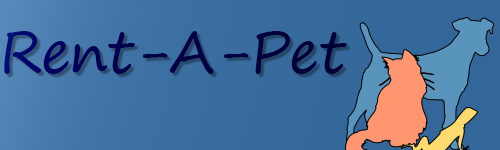
<style>
.page{position:relative;width:500px;height:150px}
.page>*{position:absolute;margin:0}
.t1{font:56.5px "SegoePrint";color:#000045}
</style>
<div class="page">
<p class="t1" style="left:4px;top:31px;width:343px;height:43px">Rent-A-Pet</p>
</div>
